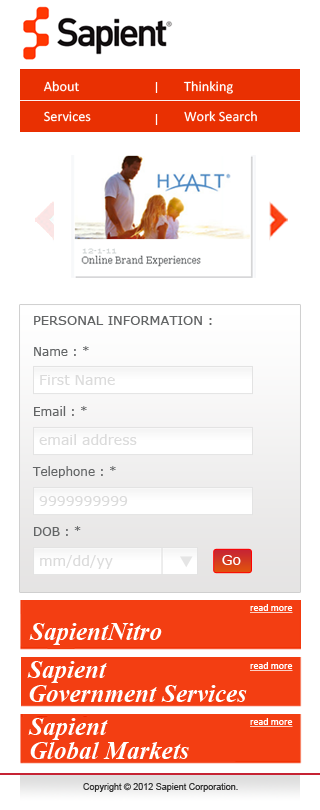
<style>
.page{position:relative;width:320px;height:810px;background:#ffffff}
.page>*{position:absolute;margin:0}
.t1{font:14.3px/30px "Calibri";color:#ffffff}
.t2{font:13px "Verdana";color:#636566}
.t3{font:12px/60px "Verdana";color:#636566}
.t4{font:14px "Verdana";color:#dbdbdb}
.t5{font:14px "Verdana";color:#ffffff}
.t6{font:10px "Calibri";color:#ffffff;text-decoration:underline}
.t7{font:25px "TimesNewRomanPS-BoldItalicMT";color:#ffffff}
.t8{font:25px/24px "TimesNewRomanPS-BoldItalicMT";color:#ffffff}
.t9{font:9px "ArialMT";color:#333333}
</style>
<div class="page">
<p class="t1" style="left:43px;top:81px;width:214px;height:41px">About              Thinking<br>Services             Work Search</p>
<p class="t2" style="left:34px;top:316px;width:178px;height:9px">PERSONAL INFORMATION :</p>
<p class="t3" style="left:32px;top:346px;width:84px;height:190px">Name : *<br>Email : *<br>Telephone : *<br>DOB : *</p>
<p class="t4" style="left:40px;top:375px;width:75px;height:10px">First Name</p>
<p class="t4" style="left:39px;top:434px;width:98px;height:11px">email address</p>
<p class="t4" style="left:39px;top:496px;width:89px;height:10px">9999999999</p>
<p class="t4" style="left:40px;top:555px;width:73px;height:14px">mm/dd/yy</p>
<p class="t5" style="left:222px;top:555px;width:19px;height:10px">Go</p>
<p class="t6" style="left:250px;top:604px;width:43px;height:9px">read more</p>
<p class="t7" style="left:29px;top:623px;width:133px;height:22px">SapientNitro</p>
<p class="t8" style="left:27px;top:661px;width:220px;height:41px">Sapient<br>Government Services</p>
<p class="t6" style="left:250px;top:662px;width:43px;height:9px">read more</p>
<p class="t8" style="left:28px;top:718px;width:161px;height:41px">Sapient<br>Global Markets</p>
<p class="t6" style="left:250px;top:718px;width:43px;height:9px">read more</p>
<p class="t9" style="left:83px;top:783px;width:155px;height:9px">Copyright © 2012 Sapient Corporation.</p>
</div>
